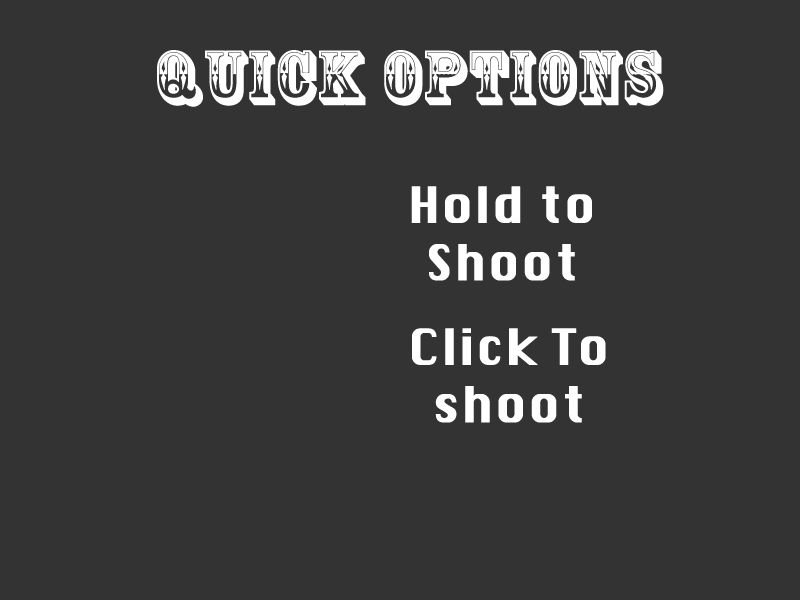
<style>
.page{position:relative;width:800px;height:600px;background:#333333}
.page>*{position:absolute;margin:0}
.t1{font:72px "RosewoodStd-Regular";color:#ffffff;font-weight:bold}
.t2{font:48px "Silom";color:#ffffff;font-weight:bold}
</style>
<div class="page">
<p class="t1" style="left:157px;top:50px;width:507px;height:57px">Quick Options</p>
<p class="t2" style="left:411px;top:186px;width:181px;height:95px;text-align:center">Hold to Shoot</p>
<p class="t2" style="left:412px;top:328px;width:194px;height:95px;text-align:center">Click To shoot</p>
</div>
